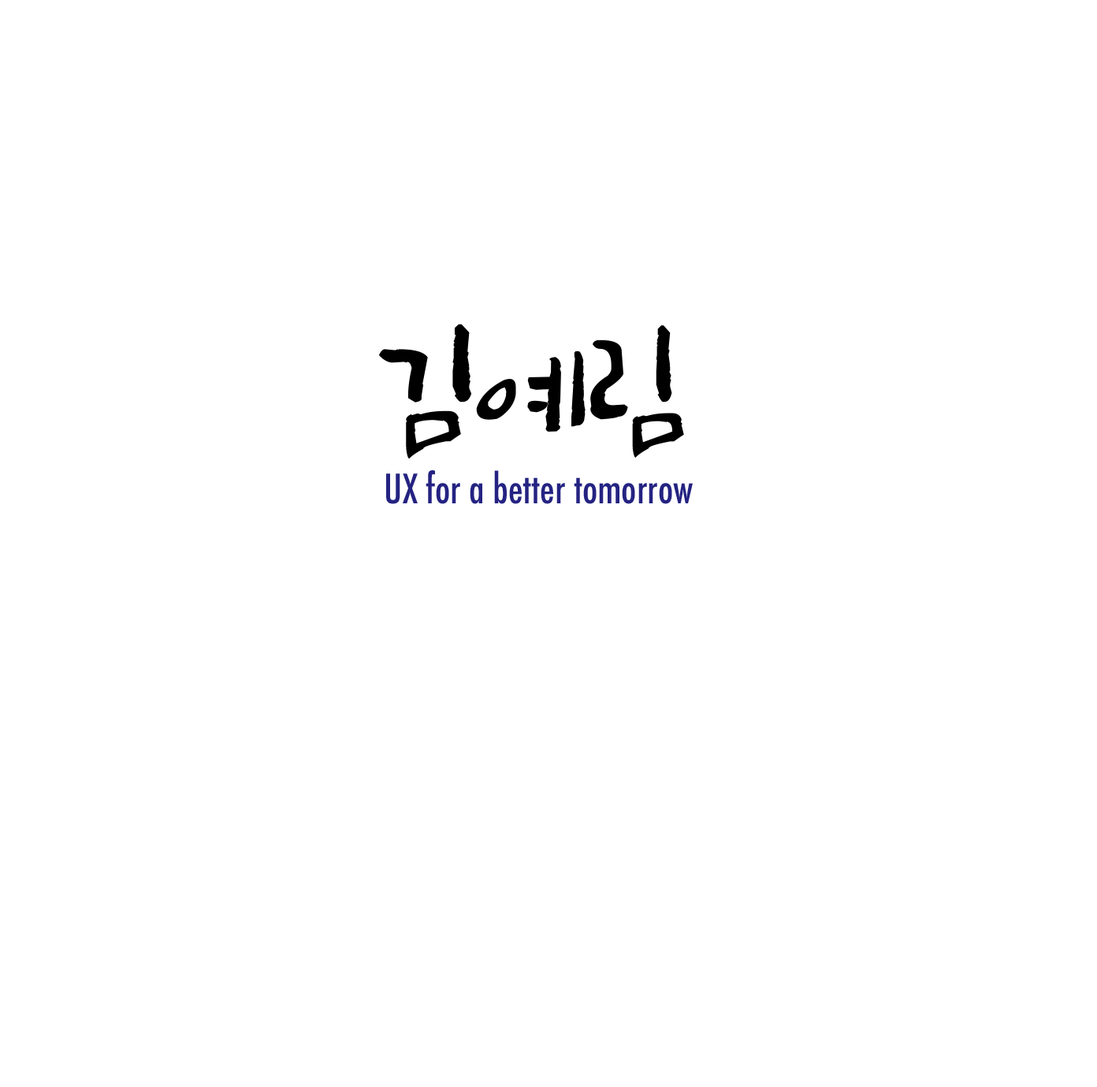
<style>
.page{position:relative;width:1097px;height:1087px;background:#ffffff}
.page>*{position:absolute;margin:0}
.t1{font:141.8px "SangSangFlowerRoad";color:#000000}
.t2{font:39.4px "Futura-CondensedMedium";color:#242382}
</style>
<div class="page">
<p class="t1" style="left:379px;top:324px;width:305px;height:135px">김예림</p>
<p class="t2" style="left:386px;top:470px;width:307px;height:34px">UX for a better tomorrow</p>
</div>
